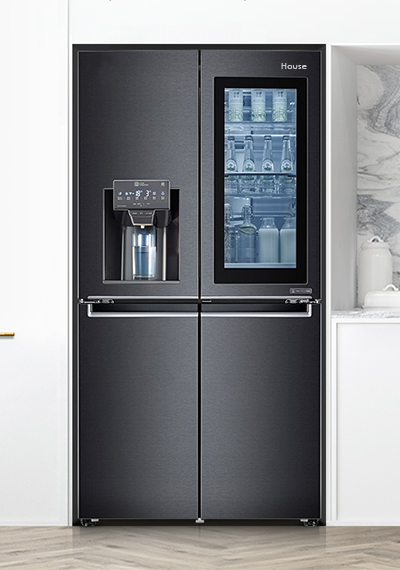
<style>
.page{position:relative;width:400px;height:570px}
.page>*{position:absolute;margin:0}
.t1{font:8px "CenturyGothic";letter-spacing:0.06em;color:#c7c7c7}
</style>
<div class="page">
<p class="t1" style="left:281px;top:63px;width:26px;height:6px">House</p>
</div>
